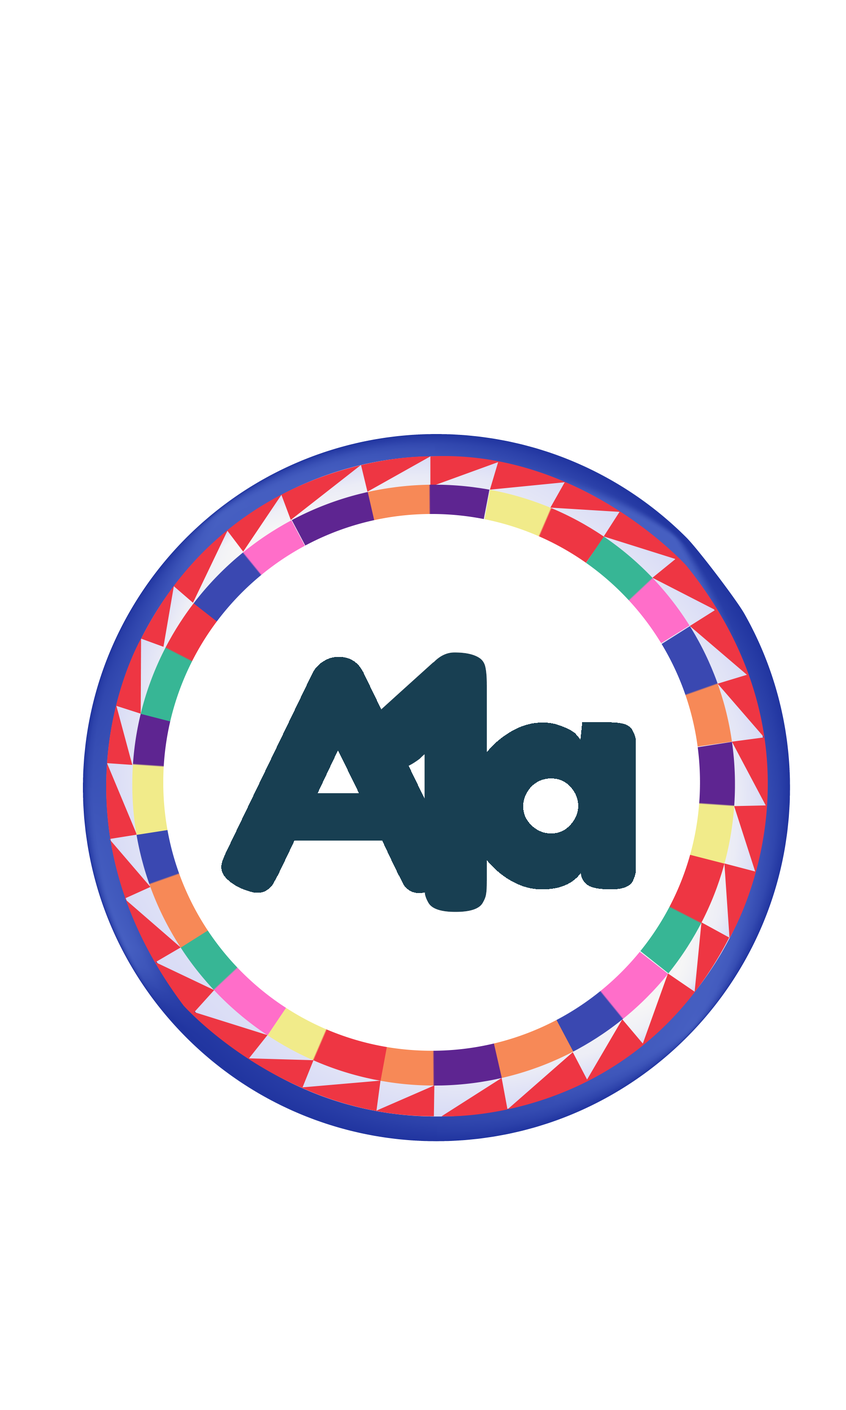
<style>
.page{position:relative;width:846px;height:1410px;background:#ffffff}
.page>*{position:absolute;margin:0}
.t1{font:352.5px "ForkdokaOne-Regular";color:#183f52}
.t2{font:317.2px "ForkdokaOne-Regular";color:#183f52}
</style>
<div class="page">
<p class="t1" style="left:362px;top:652px;width:125px;height:260px">1</p>
<p class="t2" style="left:221px;top:657px;width:415px;height:236px">Aa</p>
</div>
